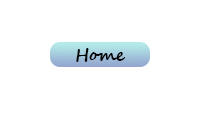
<style>
.page{position:relative;width:206px;height:122px;background:#ffffff}
.page>*{position:absolute;margin:0}
.t1{font:16.7px "SegoeScript-Bold";color:#040404}
</style>
<div class="page">
<p class="t1" style="left:76px;top:48px;width:50px;height:14px">Home</p>
</div>
